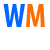
<style>
.page{position:relative;width:50px;height:50px;background:#ffffff}
.page>*{position:absolute;margin:0}
.t1{font:33.7px "MyriadPro-BoldCond";color:#0167ff;text-transform:uppercase}
.t2{font:33.7px "MyriadPro-BoldCond";color:#ff6d01;text-transform:uppercase}
</style>
<div class="page">
<p class="t1" style="left:3px;top:4px;width:42px;height:23px">W<span class="t2">M</span></p>
</div>
